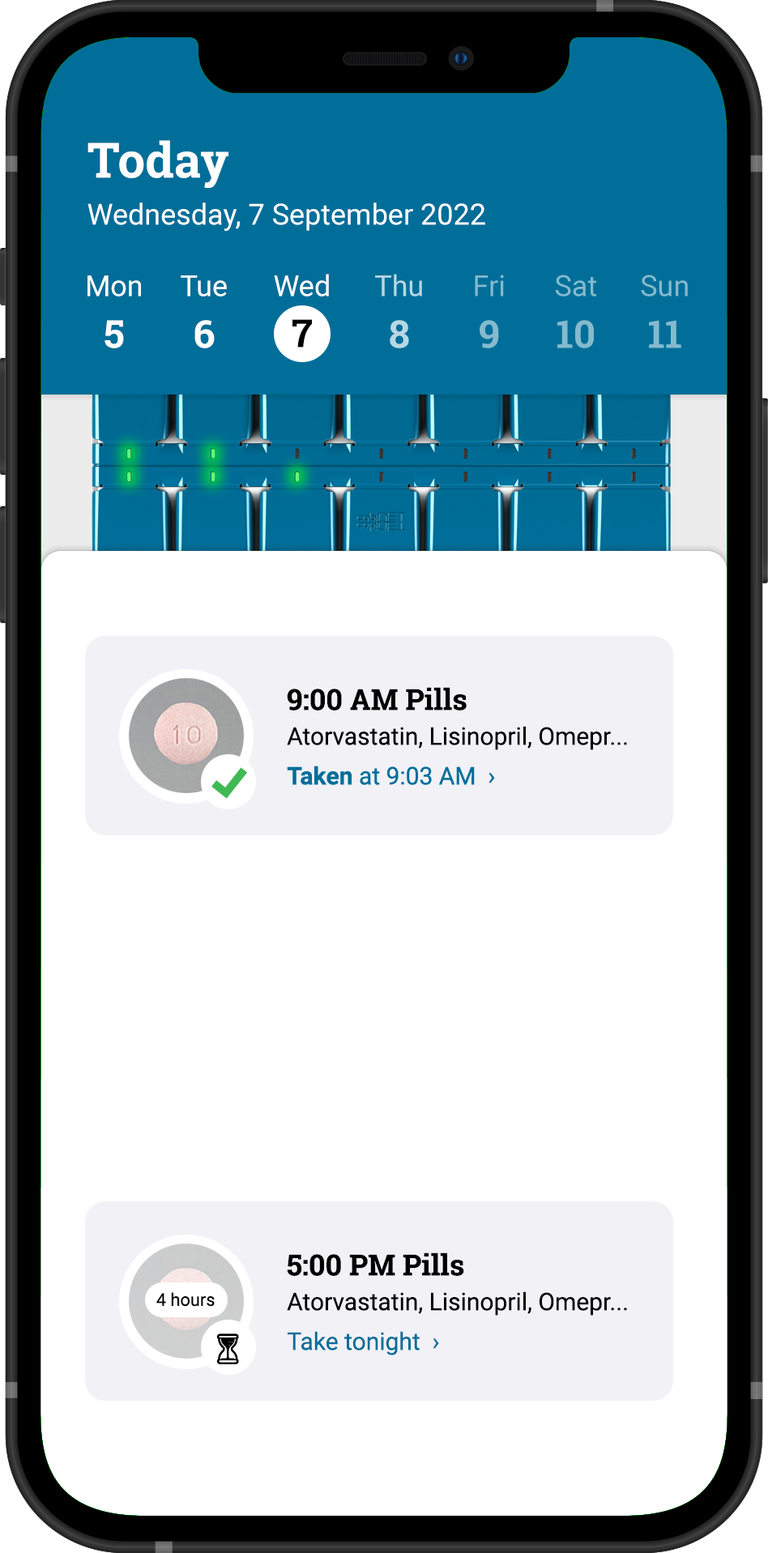
<style>
.page{position:relative;width:768px;height:1553px;background:#ffffff}
.page>*{position:absolute;margin:0}
.t1{font:48.6px "RobotoSlab-Bold";color:#ffffff}
.t2{font:29.2px "Roboto-Regular";color:#ffffff}
.t3{font:29.2px "Roboto-Regular";color:#b8d7e3}
.t4{font:29.2px "Roboto-Regular";color:#85bace}
.t5{font:38.9px "RobotoSlab-Bold";color:#ffffff}
.t6{font:38.9px "RobotoSlab-Bold";color:#000000}
.t7{font:38.9px "RobotoSlab-Bold";color:#b8d7e3}
.t8{font:38.9px "RobotoSlab-Bold";color:#85bace}
.t9{font:29.2px "RobotoSlab-Bold";color:#000000}
.t10{font:24.3px "Roboto-Regular";color:#000000}
.t11{font:24.3px "Roboto-Regular";color:#006e99}
.t12{font:24.3px "Roboto-Bold";color:#006e99}
.t13{font:17.6px "Roboto-Regular";color:#000000}
</style>
<div class="page">
<p class="t1" style="left:87px;top:140px;width:141px;height:48px">Today</p>
<p class="t2" style="left:87px;top:203px;width:398px;height:28px">Wednesday, 7 September 2022</p>
<p class="t2" style="left:87px;top:275px;width:54px;height:21px">Mon</p>
<p class="t2" style="left:181px;top:275px;width:46px;height:21px">Tue</p>
<p class="t2" style="left:274px;top:274px;width:55px;height:22px">Wed</p>
<p class="t3" style="left:375px;top:274px;width:47px;height:22px">Thu</p>
<p class="t4" style="left:475px;top:275px;width:29px;height:21px">Fri</p>
<p class="t4" style="left:555px;top:275px;width:41px;height:21px">Sat</p>
<p class="t4" style="left:641px;top:275px;width:47px;height:21px">Sun</p>
<p class="t5" style="left:104px;top:320px;width:20px;height:28px">5</p>
<p class="t5" style="left:194px;top:320px;width:21px;height:28px">6</p>
<p class="t6" style="left:292px;top:319px;width:20px;height:29px">7</p>
<p class="t7" style="left:390px;top:320px;width:19px;height:28px">8</p>
<p class="t8" style="left:480px;top:320px;width:19px;height:28px">9</p>
<p class="t8" style="left:557px;top:320px;width:37px;height:28px">10</p>
<p class="t8" style="left:649px;top:320px;width:32px;height:28px">11</p>
<p class="t9" style="left:287px;top:687px;width:180px;height:23px">9:00 AM Pills</p>
<p class="t10" style="left:287px;top:726px;width:340px;height:24px">Atorvastatin, Lisinopril, Omepr...</p>
<p class="t11" style="left:287px;top:765px;width:208px;height:20px"><span class="t12">Taken </span>at 9:03 AM  ›</p>
<p class="t9" style="left:287px;top:1252px;width:177px;height:24px">5:00 PM Pills</p>
<p class="t13" style="left:156px;top:1292px;width:59px;height:15px">4 hours</p>
<p class="t10" style="left:287px;top:1291px;width:340px;height:24px">Atorvastatin, Lisinopril, Omepr...</p>
<p class="t11" style="left:288px;top:1331px;width:151px;height:24px">Take tonight  ›</p>
</div>
